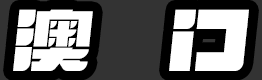
<style>
.page{position:relative;width:262px;height:80px;background:#ffffff}
.page>*{position:absolute;margin:0}
.t1{font:81.8px "zihunqijiyuzhouti_trial";letter-spacing:0.9em;color:#ffffff}
</style>
<div class="page">
<p class="t1" style="left:13px;top:9px;width:236px;height:62px">澳门</p>
</div>
